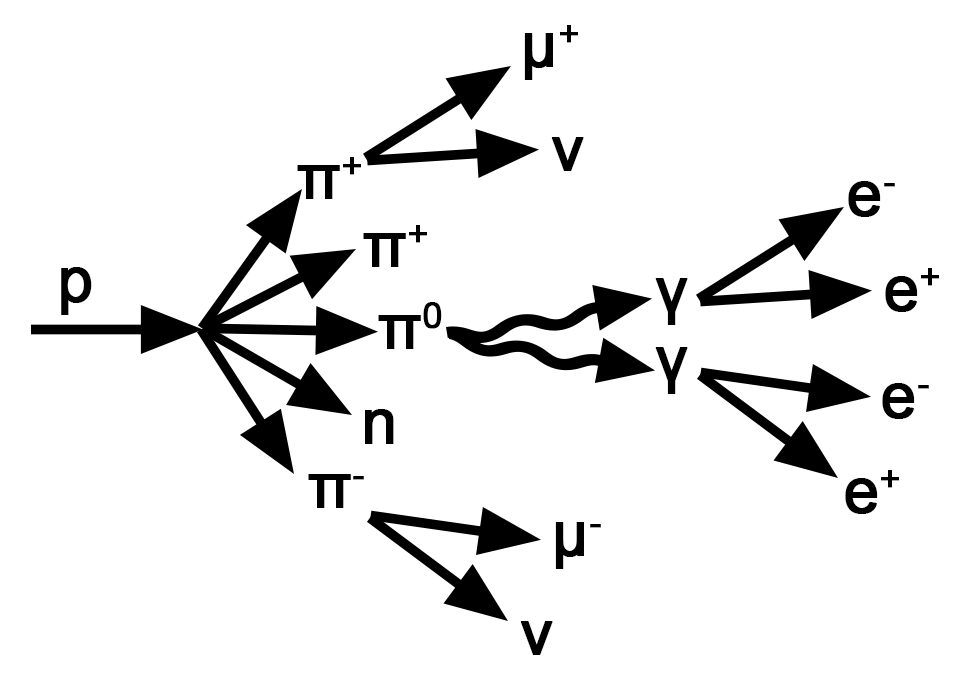
<style>
.page{position:relative;width:959px;height:679px;background:#ffffff}
.page>*{position:absolute;margin:0}
.t1{font:62.5px "ArialMT";color:#000000;font-weight:bold}
</style>
<div class="page">
<p class="t1" style="left:524px;top:25px;width:54px;height:55px">μ+</p>
<p class="t1" style="left:551px;top:137px;width:33px;height:34px">ν</p>
<p class="t1" style="left:297px;top:157px;width:64px;height:42px">π+</p>
<p class="t1" style="left:848px;top:181px;width:47px;height:36px">e-</p>
<p class="t1" style="left:363px;top:225px;width:64px;height:42px">π+</p>
<p class="t1" style="left:61px;top:267px;width:31px;height:48px">p</p>
<p class="t1" style="left:885px;top:268px;width:54px;height:44px">e+</p>
<p class="t1" style="left:655px;top:278px;width:33px;height:47px">γ</p>
<p class="t1" style="left:378px;top:302px;width:64px;height:47px">π0</p>
<p class="t1" style="left:655px;top:347px;width:33px;height:47px">γ</p>
<p class="t1" style="left:882px;top:383px;width:47px;height:36px">e-</p>
<p class="t1" style="left:365px;top:409px;width:29px;height:35px">n</p>
<p class="t1" style="left:845px;top:470px;width:54px;height:44px">e+</p>
<p class="t1" style="left:308px;top:474px;width:56px;height:34px">π-</p>
<p class="t1" style="left:555px;top:522px;width:46px;height:47px">μ-</p>
<p class="t1" style="left:520px;top:621px;width:33px;height:34px">ν</p>
</div>
